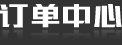
<style>
.page{position:relative;width:122px;height:45px;background:#333333}
.page>*{position:absolute;margin:0}
.t1{font:31.6px "RTWSBanHeiG0v1-Regular";letter-spacing:0.12em;color:#ffffff;scale:0.89 1}
</style>
<div class="page">
<p class="t1" style="left:0px;top:4px;width:122px;height:24px">订单中心</p>
</div>
